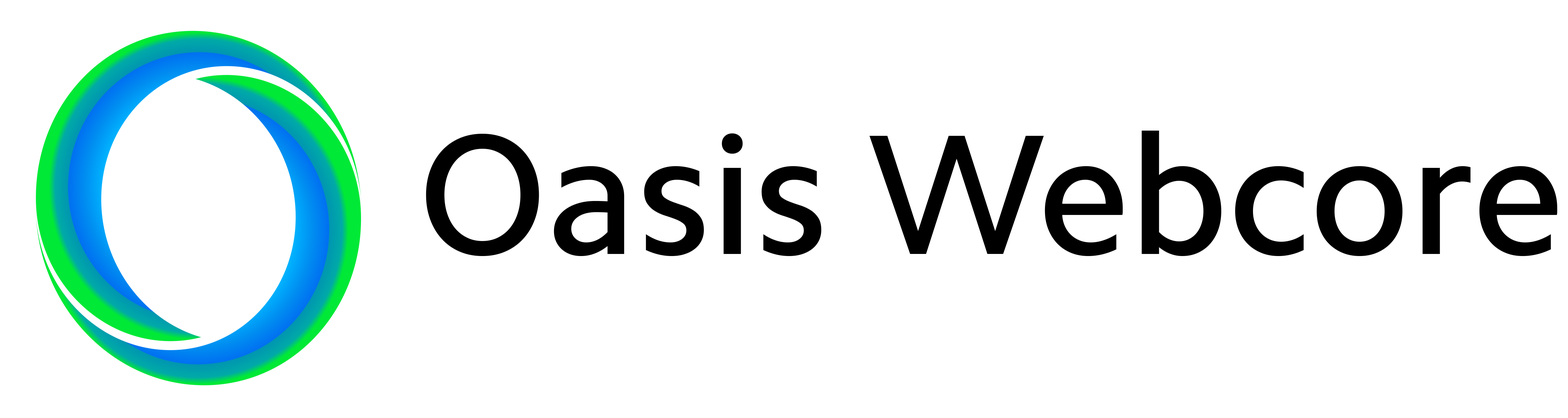
<style>
.page{position:relative;width:1568px;height:418px;background:#ffffff}
.page>*{position:absolute;margin:0}
.t1{font:171.9px "CamphorW04-Medium";color:#000000}
</style>
<div class="page">
<p class="t1" style="left:426px;top:130px;width:1132px;height:126px">Oasis Webcore</p>
</div>
